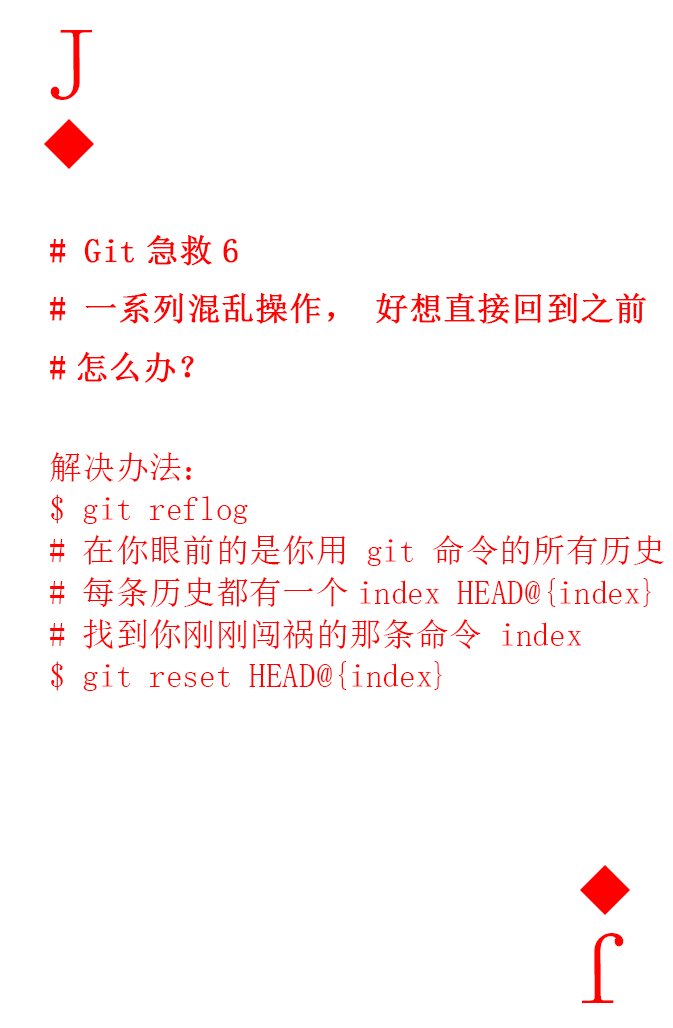
<style>
.page{position:relative;width:673px;height:1028px;background:#ffffff}
.page>*{position:absolute;margin:0}
.t1{font:104.2px "SimSun-ExtB";color:#ff0101;scale:0.93 1}
.t2{font:33.3px/41.7px "SimSun";color:#ff0101}
.t3{font:33.3px "SimSun";color:#ff0101;font-weight:bold}
</style>
<div class="page">
<p class="t1" style="left:50px;top:29px;width:42px;height:71px">J</p>
<p class="t2" style="left:50px;top:235px;width:614px;height:456px"><span class="t3"># Git急救6<br># 一系列混乱操作，好想直接回到之前<br>#怎么办？<br></span><br>解决办法：<br>$ git reflog<br># 在你眼前的是你用 git 命令的所有历史<br># 每条历史都有一个index HEAD@{index}<br># 找到你刚刚闯祸的那条命令 index<br>$ git reset HEAD@{index}</p>
<p class="t1" style="left:582px;top:933px;width:42px;height:71px;rotate:180deg">J</p>
</div>
